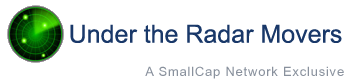
<style>
.page{position:relative;width:347px;height:80px;background:#ffffff}
.page>*{position:absolute;margin:0}
.t1{font:25px "ArialMT";color:#193869}
.t2{font:13px "HelveticaTTF";letter-spacing:0.06em;color:#89919d}
</style>
<div class="page">
<p class="t1" style="left:70px;top:24px;width:272px;height:19px">Under the Radar Movers</p>
<p class="t2" style="left:145px;top:66px;width:199px;height:13px">A SmallCap Network Exclusive</p>
</div>
